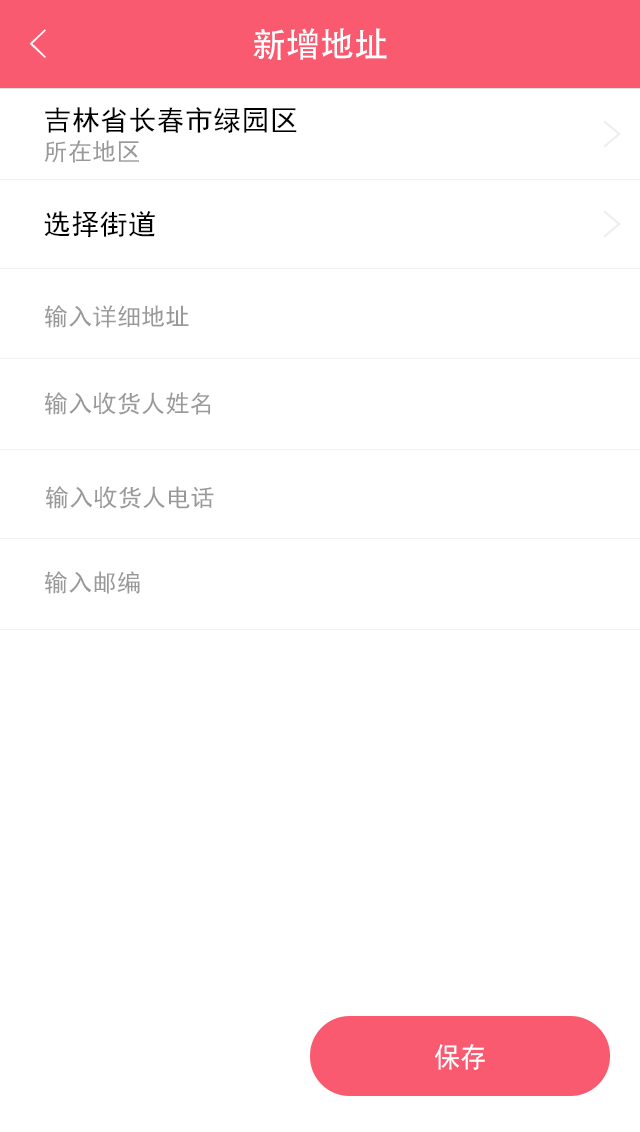
<style>
.page{position:relative;width:640px;height:1132px;background:#ffffff}
.page>*{position:absolute;margin:0}
.t1{font:40px "FZYXJW--GB1-0";color:#ffffff}
.t2{font:34px "AdobeHeitiStd-Regular";color:#ffffff}
.t3{font:28px "SimHei";letter-spacing:0.01em;color:#000000}
.t4{font:24px "SimHei";letter-spacing:0.01em;color:#999999}
.t5{font:28px "SimHei";color:#ffffff;scale:0.94 1}
</style>
<div class="page">
<p class="t1" style="left:29px;top:29px;width:17px;height:29px">&lt;</p>
<p class="t2" style="left:253px;top:28px;width:134px;height:32px">新增地址</p>
<p class="t3" style="left:45px;top:107px;width:252px;height:26px">吉林省长春市绿园区</p>
<p class="t4" style="left:44px;top:140px;width:95px;height:23px">所在地区</p>
<p class="t3" style="left:44px;top:211px;width:111px;height:26px">选择街道</p>
<p class="t4" style="left:45px;top:305px;width:144px;height:23px">输入详细地址</p>
<p class="t4" style="left:45px;top:392px;width:165px;height:23px">输入收货人姓名</p>
<p class="t4" style="left:46px;top:486px;width:168px;height:23px">输入收货人电话</p>
<p class="t4" style="left:45px;top:571px;width:95px;height:23px">输入邮编</p>
<p class="t5" style="left:434px;top:1044px;width:51px;height:26px">保存</p>
</div>
